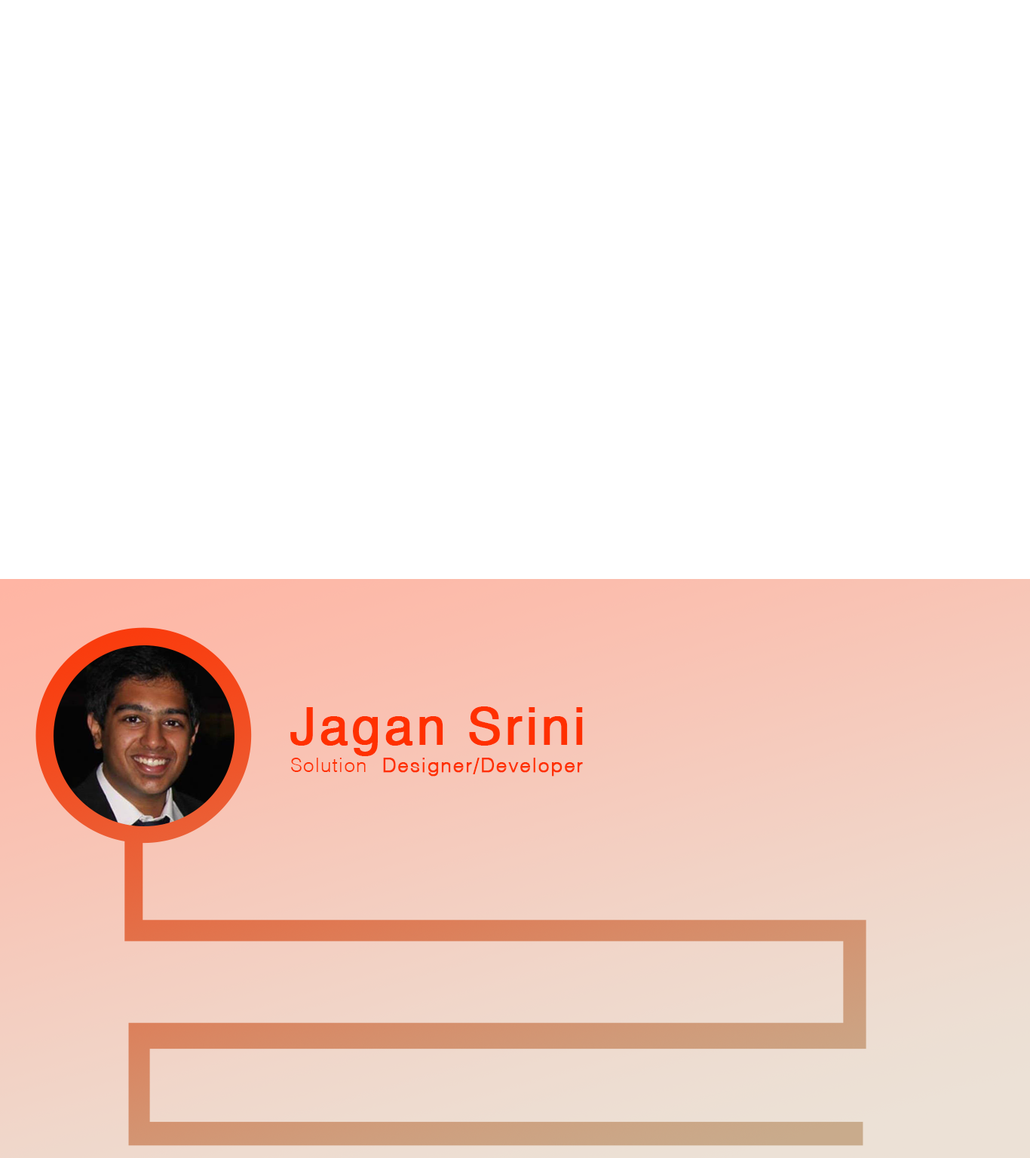
<style>
.page{position:relative;width:1030px;height:1158px;background:#ffffff}
.page>*{position:absolute;margin:0}
.t1{font:51.1px "Helvetica";letter-spacing:0.05em;color:#ff3000;font-weight:bold}
.t2{font:19.6px "Helvetica-Light";letter-spacing:0.05em;color:#ff3000;font-weight:bold}
.t3{font:19.6px "Helvetica-Light";letter-spacing:0.05em;color:#ff3000}
</style>
<div class="page">
<p class="t1" style="left:290px;top:706px;width:293px;height:50px">Jagan Srini</p>
<p class="t2" style="left:291px;top:758px;width:292px;height:18px"><span class="t3">Solution</span>  Designer/Developer</p>
</div>
